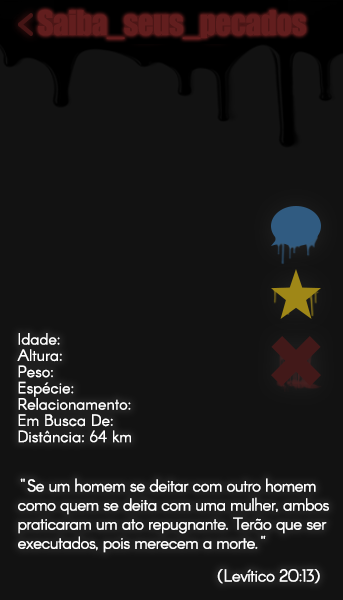
<style>
.page{position:relative;width:343px;height:600px;background:#121212}
.page>*{position:absolute;margin:0}
.t1{font:31px "Impact";letter-spacing:-0.015em;color:#621e1e}
.t2{font:16px "Arcon-Regular";color:#ffffff}
.t3{font:17px/22px "Arcon-Regular";letter-spacing:-0.032em;color:#ffffff}
.t4{font:17px "Arcon-Regular";letter-spacing:-0.024em;color:#ffffff}
</style>
<div class="page">
<p class="t1" style="left:38px;top:9px;width:268px;height:30px">Saiba_seus_pecados</p>
<p class="t2" style="left:17px;top:333px;width:114px;height:110px">Idade:<br>Altura:<br>Peso:<br>Espécie:<br>Relacionamento:<br>Em Busca De:<br>Distância: 64 km</p>
<p class="t3" style="left:18px;top:478px;width:311px;height:75px">"Se um homem se deitar com outro homem<br>como quem se deita com uma mulher, ambos<br>praticaram um ato repugnante. Terão que ser<br>executados, pois merecem a mor­te."</p>
<p class="t4" style="left:217px;top:569px;width:103px;height:15px">(Levítico 20:13)</p>
</div>
